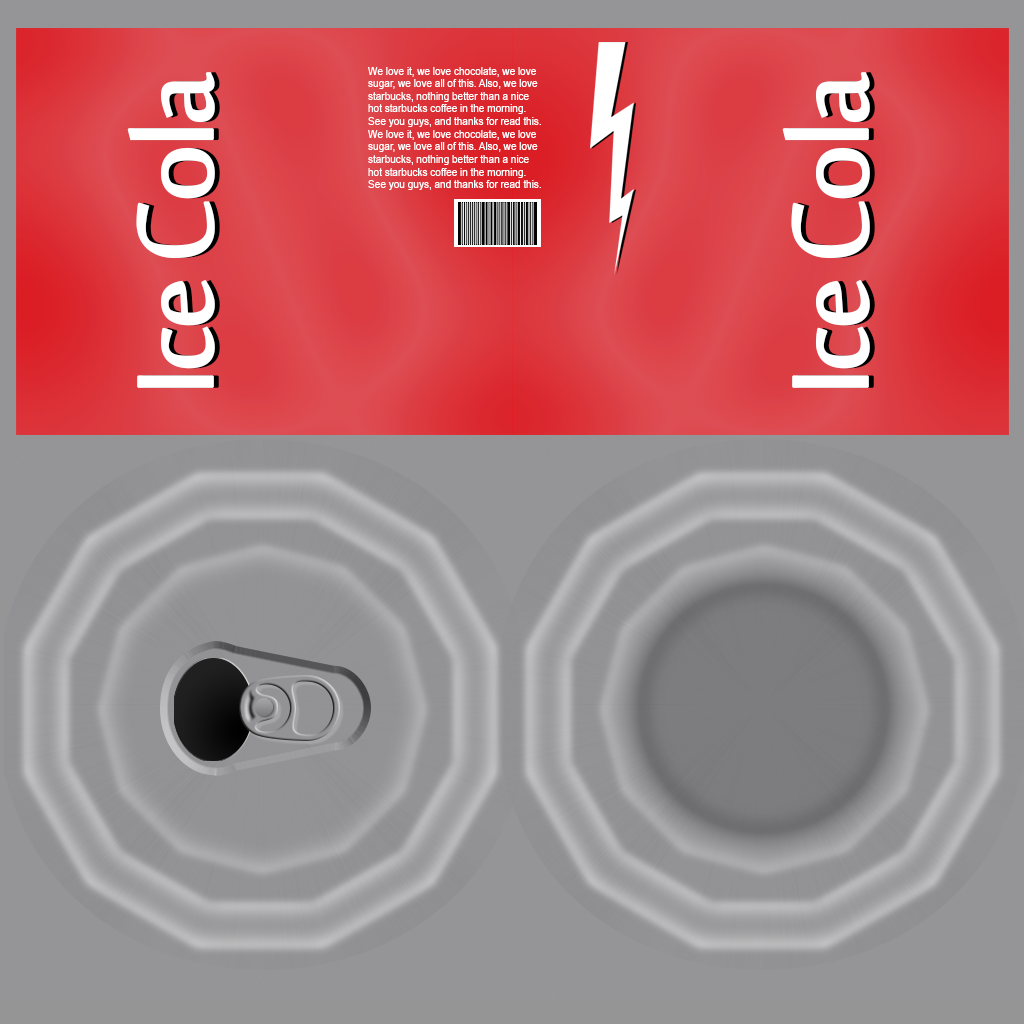
<style>
.page{position:relative;width:1024px;height:1024px}
.page>*{position:absolute;margin:0}
.t1{font:148.7px "SakkalMajalla";letter-spacing:-0.06em;color:#ffffff;font-weight:bold}
.t2{font:10.5px "ArialMT";letter-spacing:-0.02em;color:#ffffff}
</style>
<div class="page">
<p class="t1" style="left:127px;top:72px;width:88px;height:316px;rotate:-90deg">Ice Cola</p>
<p class="t1" style="left:132px;top:72px;width:88px;height:316px;rotate:-90deg">Ice Cola</p>
<p class="t2" style="left:368px;top:67px;width:173px;height:60px">We love it, we love chocolate, we love sugar, we love all of this. Also, we love starbucks, nothing better than a nice hot starbucks coffee in the morning. See you guys, and thanks for read this.</p>
<p class="t1" style="left:782px;top:72px;width:88px;height:316px;rotate:-90deg">Ice Cola</p>
<p class="t1" style="left:787px;top:72px;width:88px;height:316px;rotate:-90deg">Ice Cola</p>
<p class="t2" style="left:368px;top:130px;width:173px;height:60px">We love it, we love chocolate, we love sugar, we love all of this. Also, we love starbucks, nothing better than a nice hot starbucks coffee in the morning. See you guys, and thanks for read this.</p>
</div>
